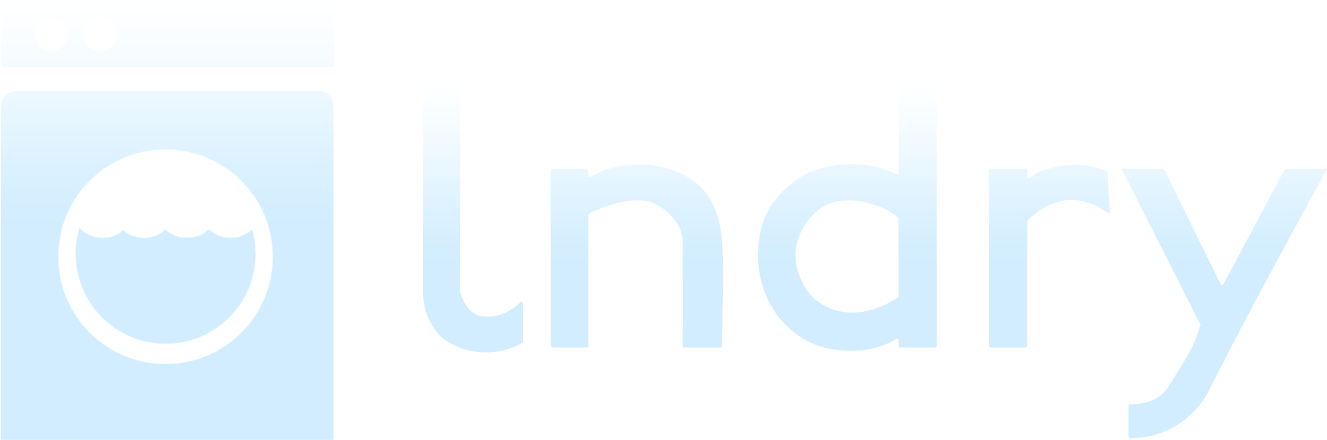
<style>
.page{position:relative;width:1327px;height:440px;background:#ffffff}
.page>*{position:absolute;margin:0}
.t1{font:403.1px "P22JohnstonUnderground";color:#d4eeff}
</style>
<div class="page">
<p class="t1" style="left:423px;top:79px;width:904px;height:360px">lndry</p>
</div>
